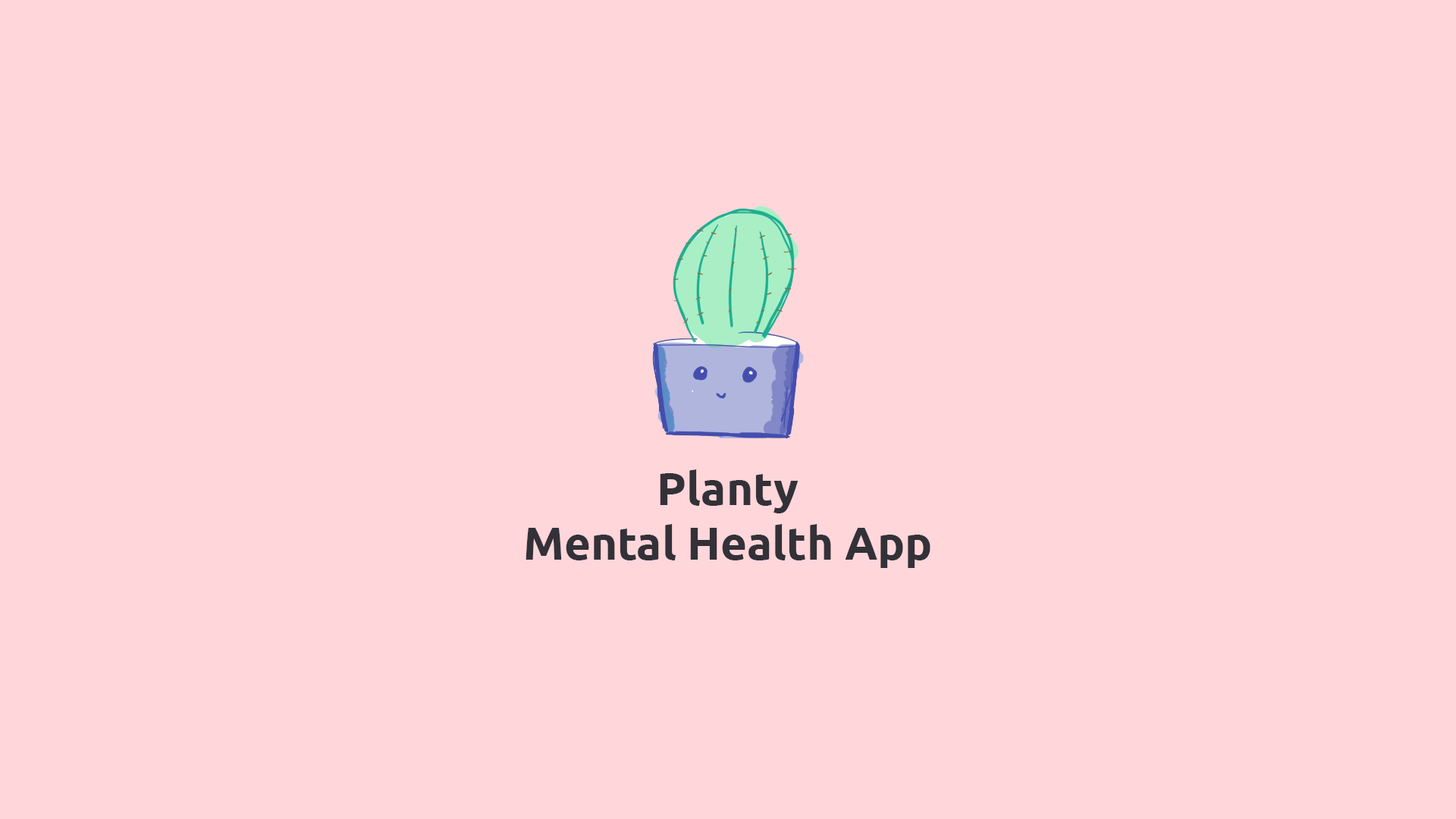
<style>
.page{position:relative;width:1456px;height:819px;background:#ffd6da}
.page>*{position:absolute;margin:0}
.t1{font:45.5px "Ubuntu-Bold";color:#333138}
</style>
<div class="page">
<p class="t1" style="left:526px;top:469px;width:404px;height:99px;text-align:center">Planty<br>Mental Health App</p>
</div>
